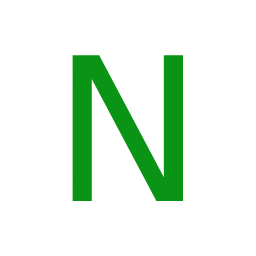
<style>
.page{position:relative;width:256px;height:256px;background:#ffffff}
.page>*{position:absolute;margin:0}
.t1{font:200px "DejaVuSans";color:#0a9416}
</style>
<div class="page">
<p class="t1" style="left:72px;top:55px;width:111px;height:146px">N</p>
</div>
